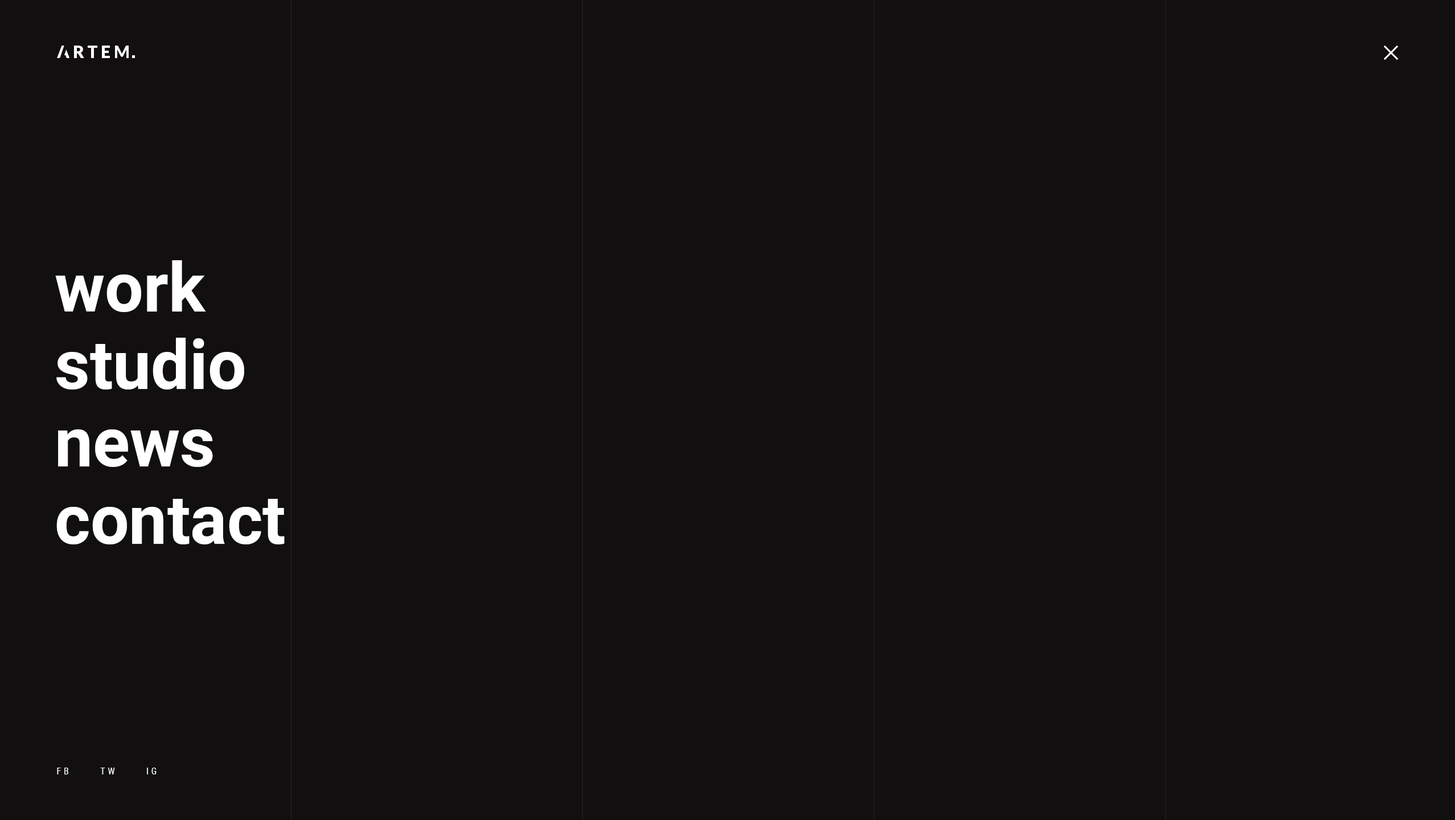
<style>
.page{position:relative;width:1455px;height:820px;background:#110f10}
.page>*{position:absolute;margin:0}
.t1{font:68.3px/77.4px "Roboto-Bold";color:#ffffff}
.t2{font:9.1px "RobotoCondensed-Regular";letter-spacing:0.3em;color:#ffffff;text-transform:uppercase}
</style>
<div class="page">
<p class="t1" style="left:55px;top:260px;width:230px;height:284px">work<br>studio<br>news<br>contact</p>
<p class="t2" style="left:57px;top:767px;width:100px;height:7px">Fb      Tw      Ig</p>
</div>
